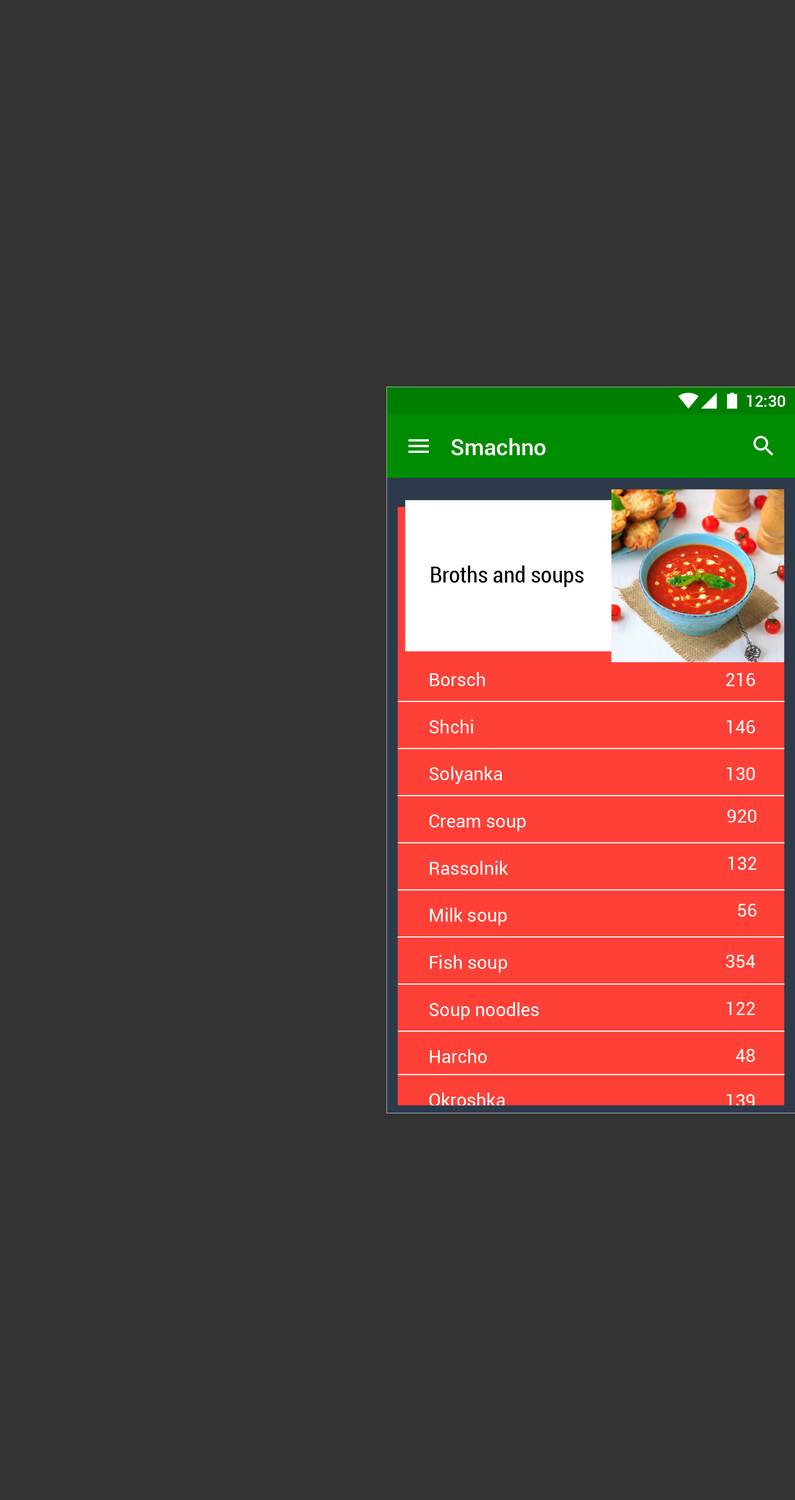
<style>
.page{position:relative;width:795px;height:1500px;background:#333333}
.page>*{position:absolute;margin:0}
.t1{font:15.9px "Roboto-Medium";color:#ffffff}
.t2{font:22.7px "Roboto-Medium";color:#ffffff}
.t3{font:22.7px "Roboto-Condensed";color:#000000}
.t4{font:18.1px "Roboto-Regular";color:#ffffff}
</style>
<div class="page">
<p class="t1" style="left:747px;top:395px;width:38px;height:12px">12:30</p>
<p class="t2" style="left:452px;top:438px;width:94px;height:17px">Smachno</p>
<p class="t3" style="left:431px;top:565px;width:153px;height:22px">Broths and soups</p>
<p class="t4" style="left:430px;top:672px;width:55px;height:14px">Borsch</p>
<p class="t4" style="left:726px;top:673px;width:29px;height:13px">216</p>
<p class="t4" style="left:429px;top:719px;width:44px;height:14px">Shchi</p>
<p class="t4" style="left:727px;top:720px;width:28px;height:13px">146</p>
<p class="t4" style="left:429px;top:766px;width:73px;height:18px">Solyanka</p>
<p class="t4" style="left:727px;top:767px;width:28px;height:13px">130</p>
<p class="t4" style="left:728px;top:809px;width:29px;height:13px">920</p>
<p class="t4" style="left:429px;top:814px;width:97px;height:17px">Cream soup</p>
<p class="t4" style="left:728px;top:856px;width:29px;height:14px">132</p>
<p class="t4" style="left:430px;top:861px;width:78px;height:14px">Rassolnik</p>
<p class="t4" style="left:738px;top:903px;width:19px;height:13px">56</p>
<p class="t4" style="left:430px;top:907px;width:77px;height:18px">Milk soup</p>
<p class="t4" style="left:430px;top:955px;width:77px;height:17px">Fish soup</p>
<p class="t4" style="left:726px;top:954px;width:29px;height:13px">354</p>
<p class="t4" style="left:429px;top:1002px;width:110px;height:18px">Soup noodles</p>
<p class="t4" style="left:727px;top:1002px;width:28px;height:13px">122</p>
<p class="t4" style="left:430px;top:1049px;width:57px;height:14px">Harcho</p>
<p class="t4" style="left:736px;top:1048px;width:19px;height:14px">48</p>
<p class="t4" style="left:429px;top:1092px;width:76px;height:14px">Okroshka</p>
<p class="t4" style="left:727px;top:1094px;width:28px;height:13px">139</p>
</div>
